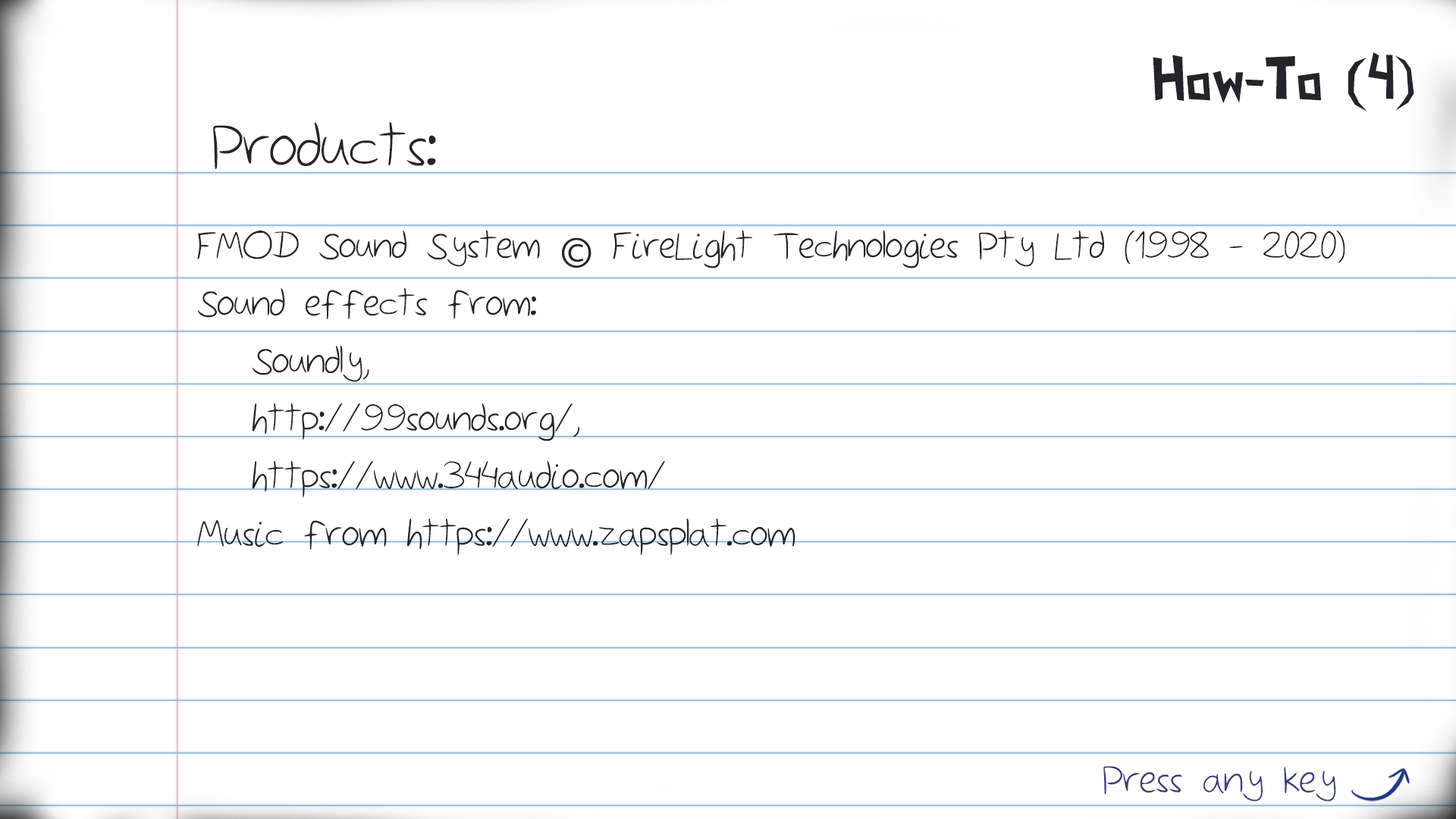
<style>
.page{position:relative;width:1456px;height:819px;background:#ffffff}
.page>*{position:absolute;margin:0}
.t1{font:59.4px "PaperCuts2";color:#242429}
.t2{font:77px "Sketchbook";color:#242429}
.t3{font:48px "Sketchbook";color:#242429}
.t4{font:48px "MyriadPro-Regular";color:#242429}
.t5{font:49.5px "Sketchbook";color:#3d3d78}
</style>
<div class="page">
<p class="t1" style="left:1153px;top:52px;width:261px;height:59px">How-To (4)</p>
<p class="t2" style="left:213px;top:122px;width:223px;height:47px">Products:</p>
<p class="t3" style="left:197px;top:231px;width:1148px;height:324px">FMOD Sound System <span class="t4">©</span> FireLight Technologies Pty Ltd (1998 - 2020)<br>Sound effects from:<br>  Soundly, <br>  http://99sounds.org/, <br>  https://www.344audio.com/<br>Music from https://www.zapsplat.com</p>
<p class="t5" style="left:1103px;top:766px;width:233px;height:36px">Press any key</p>
</div>
